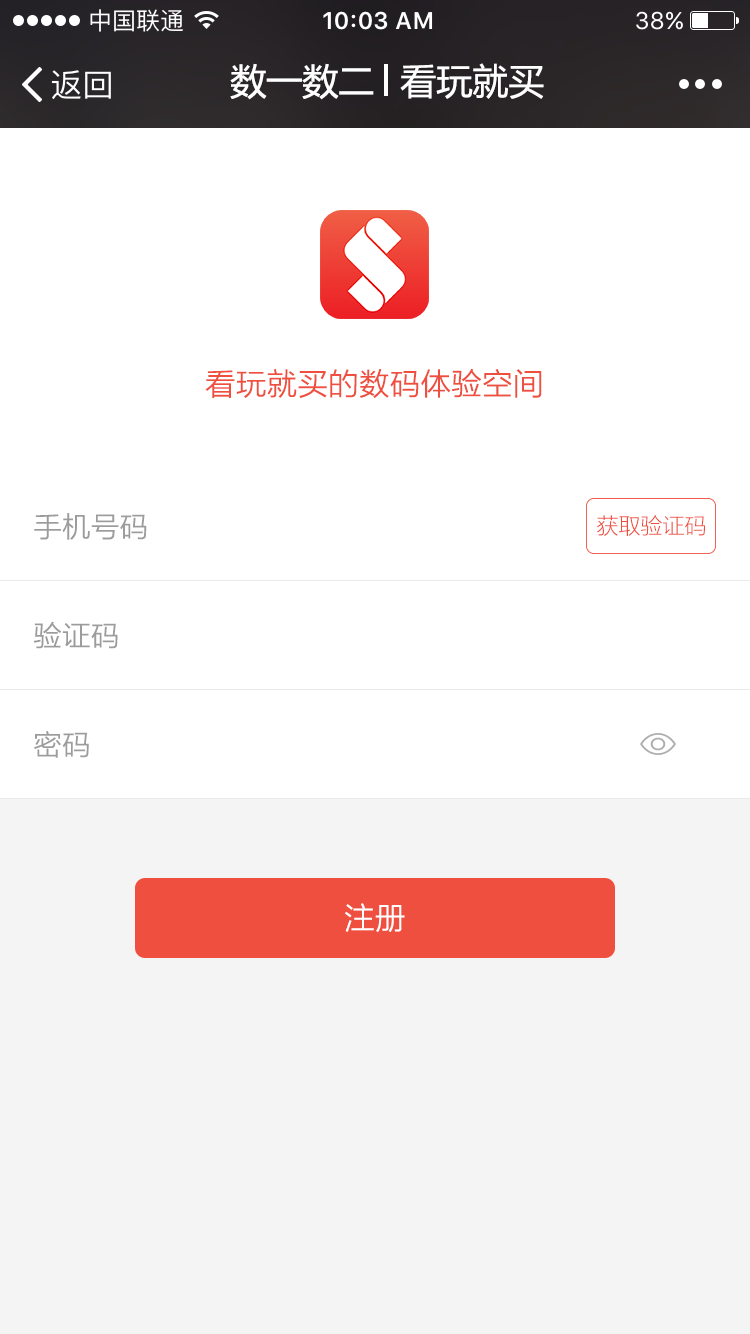
<style>
.page{position:relative;width:750px;height:1334px;background:#ffffff}
.page>*{position:absolute;margin:0}
.t1{font:36px "MicrosoftYaHei";color:#ffffff}
.t2{font:29.9px "MicrosoftYaHeiLight";color:#ef4f3e;font-weight:bold}
.t3{font:28px "MicrosoftYaHeiLight";color:#9c9c9c;font-weight:bold}
.t4{font:22px "MicrosoftYaHeiLight";color:#ef4f3e}
.t5{font:30px "MicrosoftYaHeiLight";color:#ffffff;font-weight:bold}
</style>
<div class="page">
<p class="t1" style="left:230px;top:63px;width:144px;height:37px">数一数二</p>
<p class="t1" style="left:400px;top:63px;width:144px;height:36px">看玩就买</p>
<p class="t2" style="left:205px;top:369px;width:337px;height:29px">看玩就买的数码体验空间</p>
<p class="t3" style="left:34px;top:513px;width:113px;height:27px">手机号码</p>
<p class="t4" style="left:597px;top:515px;width:108px;height:21px">获取验证码</p>
<p class="t3" style="left:34px;top:621px;width:84px;height:28px">验证码</p>
<p class="t3" style="left:34px;top:731px;width:55px;height:27px">密码</p>
<p class="t5" style="left:345px;top:903px;width:60px;height:29px">注册</p>
</div>
